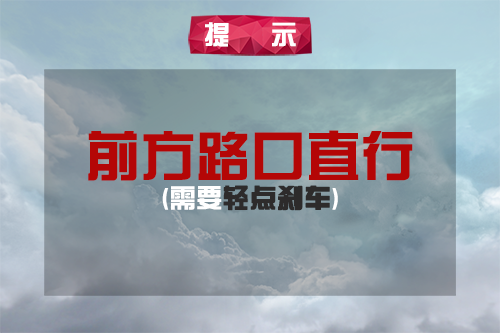
<style>
.page{position:relative;width:500px;height:333px}
.page>*{position:absolute;margin:0}
.t1{font:26.4px "FZZYJW--GB1-0";color:#ffffff}
.t2{font:55px "FZZYJW--GB1-0";color:#b40606}
.t3{font:26.4px "FZZYJW--GB1-0";color:#2d2b2b;font-weight:bold}
</style>
<div class="page">
<p class="t1" style="left:205px;top:22px;width:91px;height:25px">提 示</p>
<p class="t2" style="left:88px;top:130px;width:325px;height:81px;text-align:center">前方路口直行<br><span class="t1">(需要</span><span class="t3">轻点刹车</span><span class="t1">)</span></p>
</div>
